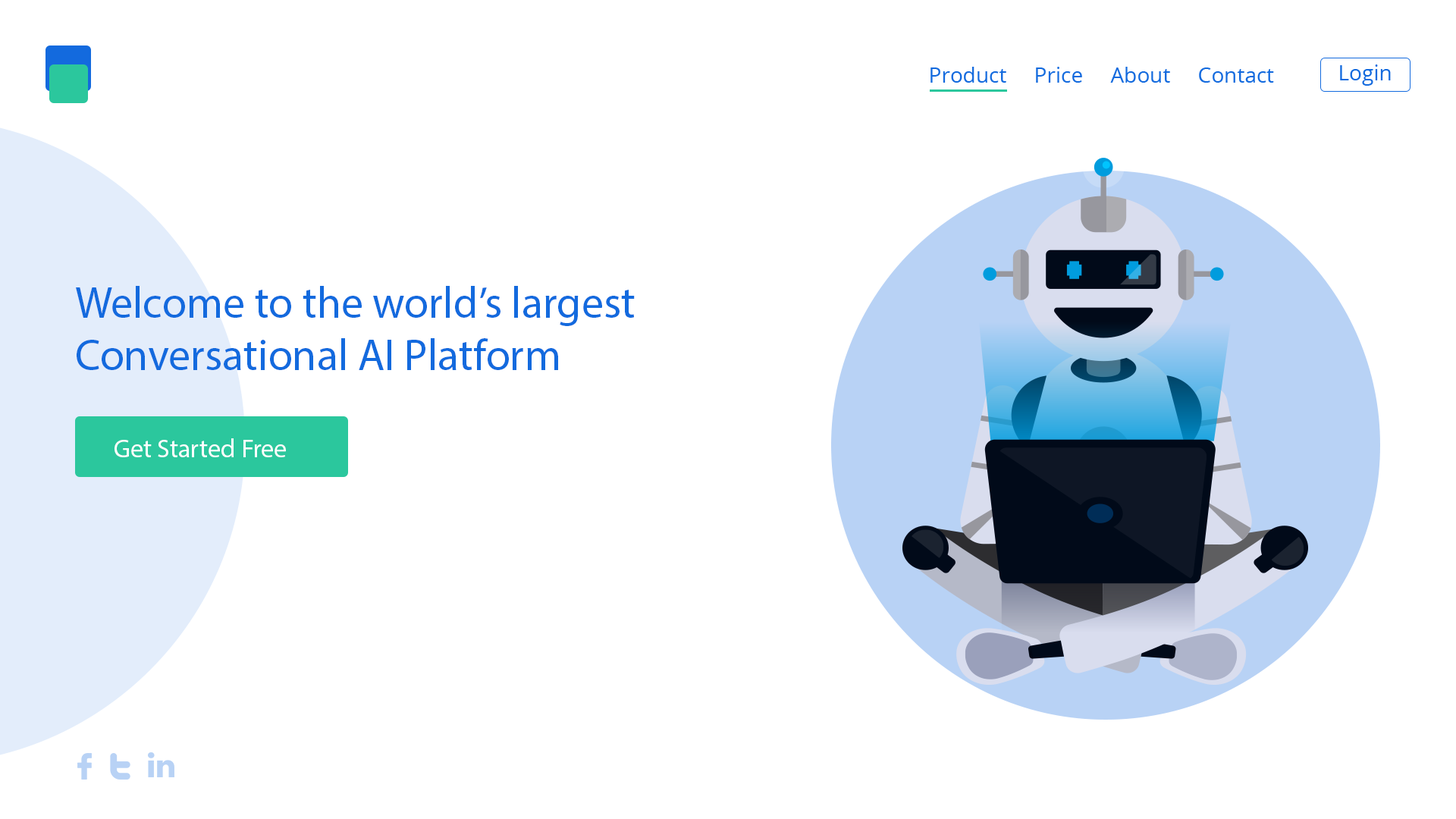
<style>
.page{position:relative;width:1456px;height:819px;background:#ffffff}
.page>*{position:absolute;margin:0}
.t1{font:21.2px "OpenSans";color:#136ade}
.t2{font:44px "MyriadPro-Regular";color:#136ade}
.t3{font:25.8px "MyriadPro-Regular";color:#ffffff}
</style>
<div class="page">
<p class="t1" style="left:1340px;top:64px;width:51px;height:22px">Login</p>
<p class="t1" style="left:930px;top:67px;width:344px;height:16px">Product     Price     About     Contact</p>
<p class="t2" style="left:76px;top:286px;width:559px;height:84px">Welcome to the world’s largest <br>Conversational AI Platform</p>
<p class="t3" style="left:115px;top:438px;width:171px;height:19px">Get Started Free</p>
</div>
